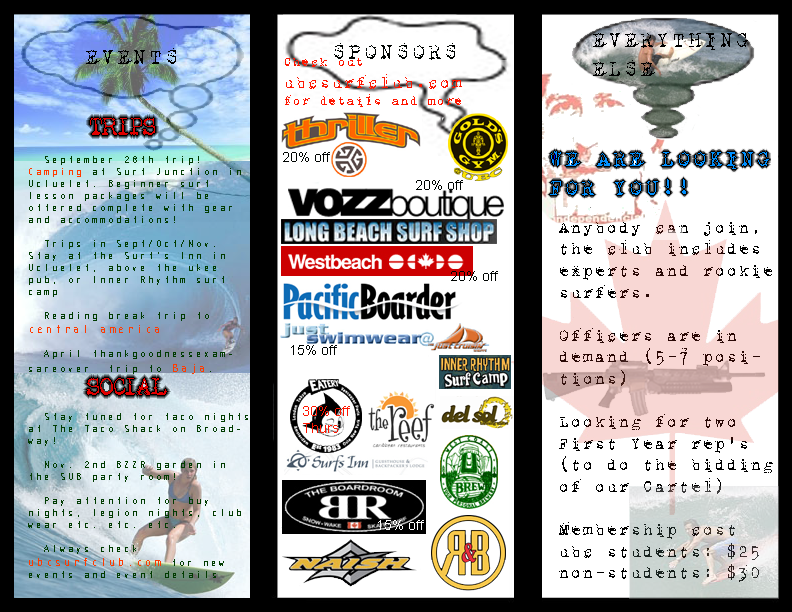
<style>
.page{position:relative;width:792px;height:612px;background:#ffffff}
.page>*{position:absolute;margin:0}
.t1{font:24px "1942report";color:#000000}
.t2{font:10px "SWLink";color:#003b00}
.t3{font:10px "SWLink";color:#ff3b00}
.t4{font:12px "SWLink";color:#ff3b00}
.t5{font:18px "1942report"}
.t6{font:18px "Adjutant-Normal"}
</style>
<div class="page">
<p class="t1" style="left:593px;top:33px;width:155px;height:43px">EVERYTHING<br>ELSE</p>
<p class="t1" style="left:86px;top:48px;width:90px;height:16px">EVENTS</p>
<p class="t2" style="left:28px;top:156px;width:220px;height:422px">• September 28th trip! <span class="t3">Camping </span>at Surf Junction in Ucluelet. Beginner surf lesson packages will be offered complete with gear and accommodations!<br><br>• Trips in Sept/Oct/Nov. Stay at the Surf’s Inn in Ucluelet, above the ukee pub, or Inner Rhythm surf camp<br><br>• Reading break trip to <span class="t4">central america<br><br></span>• April thankgoodnessexamsareover  trip to <span class="t4">Baja</span>.<br><br><br><br>• Stay tuned for taco nights at The Taco Shack on Broadway!<br><br>• Nov. 2nd BZZR garden in the SUB party room!<br><br>• Pay attention for buy nights, legion nights, club wear etc. etc. etc.<br><br>• Always check <br><span class="t4">ubcsurfclub.com</span> for new events and event details</p>
<p class="t5" style="left:559px;top:222px;width:214px;height:360px">Anybody can join, the club includes experts and rookie surfers. <br><br>Officers are in demand (5-7 positions)<br><br>Looking for two First Year rep’s (to do the bidding of our Cartel)<br><br>Membership cost<br>ubc students: <span class="t6">$</span>25<br>non-students: <span class="t6">$</span>30</p>
</div>
